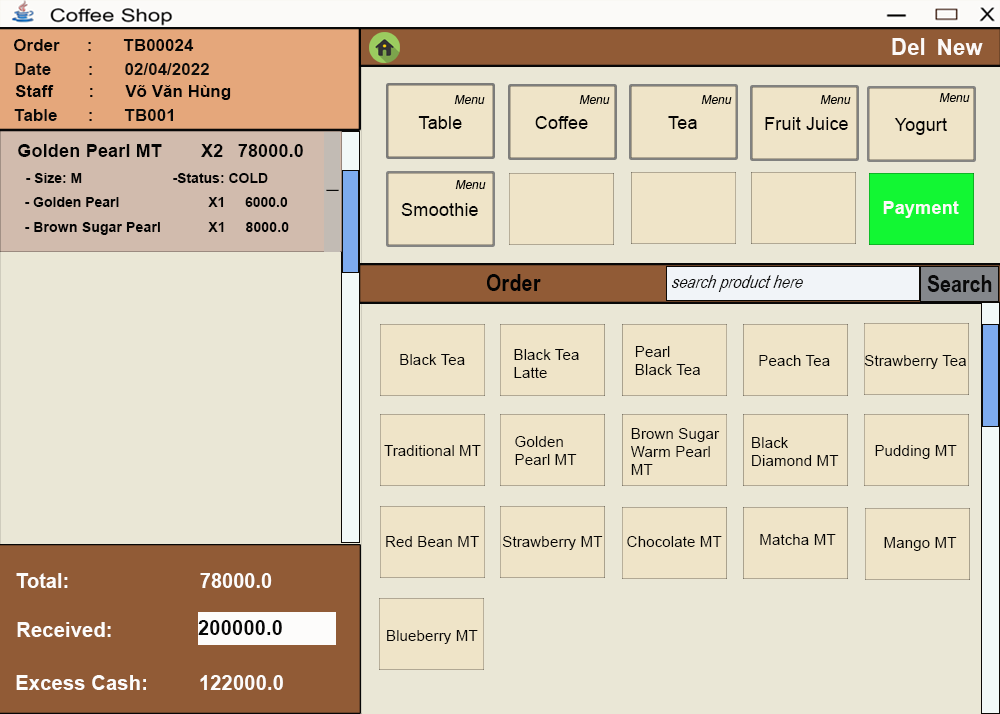
<style>
.page{position:relative;width:1000px;height:714px;background:#eae7d6}
.page>*{position:absolute;margin:0}
.t1{font:17px "Arial-BoldMT";color:#070605}
.t2{font:22.7px "Arial-BoldMT";color:#fcf9f7}
.t3{font:22.4px "Arial-BoldMT";color:#fcf9f7}
.t4{font:17px "Arial-BoldMT";color:#0c0c0b}
.t5{font:17px "Arial-BoldMT";color:#040404}
.t6{font:12px "ArialMT";color:#030303;font-style:italic}
.t7{font:11.8px "ArialMT";color:#030303;font-style:italic}
.t8{font:17px "Arial-BoldMT";color:#090909}
.t9{font:18.4px "ArialMT";color:#050404}
.t10{font:18.4px "Arial-BoldMT";color:#030303}
.t11{font:14px "Arial-BoldMT";color:#030303}
.t12{font:24px "Arial-Black";color:#090909}
.t13{font:14.3px "Arial-BoldMT";color:#030303}
.t14{font:24.5px "ArialNarrow-Bold";color:#030303}
.t15{font:18px "ArialNarrow-Italic";color:#0a0a0a;font-style:italic}
.t16{font:24px "ArialNarrow-Bold";color:#0a0a0a}
.t17{font:15.3px "ArialMT";color:#050404}
.t18{font:15.3px "ArialMT";color:#040404}
.t19{font:20px "Arial-BoldMT";color:#fdfcfb}
.t20{font:20.4px "Arial-BoldMT";color:#fdfcfb}
.t21{font:20.4px "Arial-BoldMT";color:#070707}
</style>
<div class="page">
<p class="t1" style="left:14px;top:39px;width:180px;height:12px">Order : TB00024</p>
<p class="t2" style="left:892px;top:38px;width:33px;height:17px">Del</p>
<p class="t3" style="left:938px;top:39px;width:45px;height:16px">New</p>
<p class="t4" style="left:15px;top:63px;width:194px;height:12px">Date :  02/04/2022</p>
<p class="t5" style="left:15px;top:85px;width:216px;height:15px">Staff :  Võ Văn Hùng</p>
<p class="t6" style="left:454px;top:95px;width:31px;height:9px">Menu</p>
<p class="t7" style="left:579px;top:95px;width:31px;height:9px">Menu</p>
<p class="t7" style="left:701px;top:95px;width:31px;height:9px">Menu</p>
<p class="t7" style="left:820px;top:95px;width:31px;height:9px">Menu</p>
<p class="t7" style="left:939px;top:93px;width:31px;height:9px">Menu</p>
<p class="t8" style="left:14px;top:109px;width:159px;height:12px">Table : TB001</p>
<p class="t9" style="left:418px;top:116px;width:44px;height:13px">Table</p>
<p class="t9" style="left:535px;top:116px;width:53px;height:13px">Coffee</p>
<p class="t10" style="left:18px;top:144px;width:285px;height:13px">Golden Pearl MT  X2 78000.0</p>
<p class="t11" style="left:26px;top:173px;width:242px;height:10px">- Size: M   -Status: COLD</p>
<p class="t7" style="left:455px;top:180px;width:31px;height:9px">Menu</p>
<p class="t11" style="left:25px;top:197px;width:263px;height:10px">- Golden Pearl   X1 6000.0</p>
<p class="t12" style="left:326px;top:189px;width:13px;height:2px">_</p>
<p class="t9" style="left:401px;top:203px;width:77px;height:13px">Smoothie</p>
<p class="t13" style="left:25px;top:222px;width:264px;height:13px">- Brown Sugar Pearl          X1     8000.0</p>
<p class="t14" style="left:487px;top:274px;width:54px;height:17px">Order</p>
<p class="t15" style="left:671px;top:275px;width:132px;height:17px">search product here</p>
<p class="t16" style="left:927px;top:275px;width:65px;height:17px">Search</p>
<p class="t17" style="left:514px;top:349px;width:65px;height:29px">Black Tea<br>Latte</p>
<p class="t17" style="left:635px;top:346px;width:65px;height:29px">Pearl <br>Black Tea</p>
<p class="t17" style="left:400px;top:354px;width:65px;height:11px">Black Tea</p>
<p class="t18" style="left:759px;top:355px;width:71px;height:11px">Peach Tea</p>
<p class="t18" style="left:864px;top:355px;width:102px;height:14px">Strawberry Tea</p>
<p class="t17" style="left:515px;top:436px;width:62px;height:29px">Golden<br>Pearl MT</p>
<p class="t17" style="left:631px;top:428px;width:89px;height:47px">Brown Sugar<br>Warm Pearl <br>MT</p>
<p class="t17" style="left:752px;top:437px;width:87px;height:29px">Black<br>Diamond MT</p>
<p class="t17" style="left:384px;top:445px;width:97px;height:11px">Traditional MT</p>
<p class="t17" style="left:875px;top:445px;width:82px;height:14px">Pudding MT</p>
<p class="t17" style="left:760px;top:534px;width:76px;height:11px">Matcha MT</p>
<p class="t17" style="left:386px;top:536px;width:93px;height:11px">Red Bean MT</p>
<p class="t17" style="left:502px;top:536px;width:101px;height:14px">Strawberry MT</p>
<p class="t17" style="left:627px;top:536px;width:95px;height:11px">Chocolate MT</p>
<p class="t17" style="left:884px;top:537px;width:73px;height:14px">Mango MT</p>
<p class="t19" style="left:16px;top:573px;width:256px;height:15px">Total:                   78000.0</p>
<p class="t20" style="left:17px;top:622px;width:94px;height:15px">Received:</p>
<p class="t21" style="left:198px;top:620px;width:84px;height:15px">200000.0</p>
<p class="t17" style="left:387px;top:630px;width:91px;height:14px">Blueberry MT</p>
<p class="t20" style="left:16px;top:675px;width:267px;height:15px">Excess Cash:  122000.0</p>
</div>
